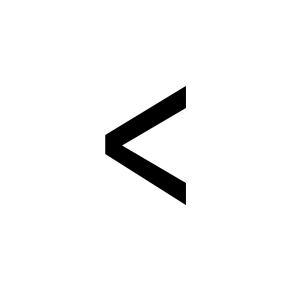
<style>
.page{position:relative;width:300px;height:300px;background:#ffffff}
.page>*{position:absolute;margin:0}
.t1{font:250.5px "ArialMT";letter-spacing:-0.04em;color:#000000;scale:0.68 1}
</style>
<div class="page">
<p class="t1" style="left:105px;top:85px;width:81px;height:120px">&lt;</p>
</div>
